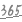
<style>
.page{position:relative;width:22px;height:22px;background:#ffffff}
.page>*{position:absolute;margin:0}
.t1{font:14px "-";color:#7f7f7f}
</style>
<div class="page">
<p class="t1" style="left:1px;top:4px;width:21px;height:12px">365</p>
</div>
